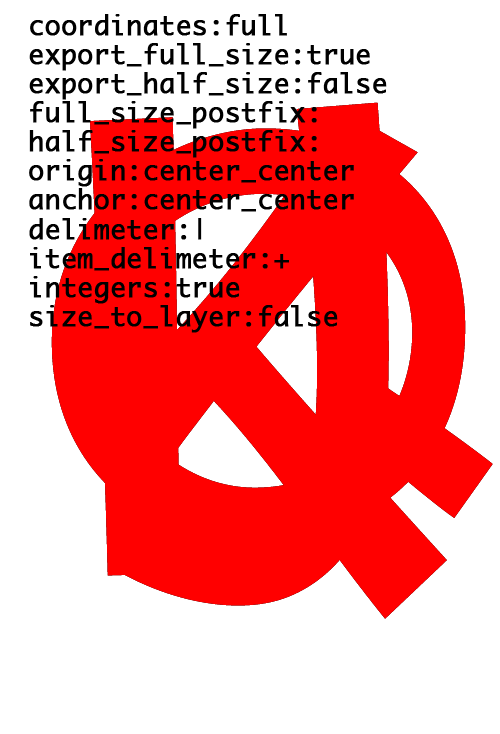
<style>
.page{position:relative;width:500px;height:734px;background:#ffffff}
.page>*{position:absolute;margin:0}
.t1{font:26.1px "Monaco";color:#000000;font-weight:bold}
.t2{font:634.7px "Mr.Jenkins";color:#ff0000}
.t3{font:517.7px "Mr.Jenkins";color:#ff0000}
</style>
<div class="page">
<p class="t1" style="left:29px;top:14px;width:358px;height:319px">coordinates:full<br>export_full_size:true<br>export_half_size:false<br>full_size_postfix:<br>half_size_postfix:<br>origin:center_center<br>anchor:center_center<br>delimeter:|<br>item_delimeter:+<br>integers:true<br>size_to_layer:false</p>
<p class="t2" style="left:90px;top:109px;width:357px;height:510px">K</p>
<p class="t2" style="left:90px;top:109px;width:357px;height:510px">K</p>
<p class="t3" style="left:51px;top:128px;width:442px;height:416px">Q</p>
<p class="t3" style="left:51px;top:128px;width:442px;height:416px">Q</p>
</div>
